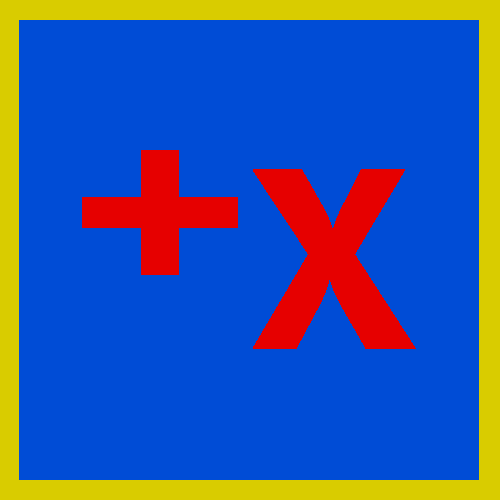
<style>
.page{position:relative;width:500px;height:500px;background:#004cd6}
.page>*{position:absolute;margin:0}
.t1{font:353px "Futura-CondensedMedium";color:#e60000;scale:1.25 1}
</style>
<div class="page">
<p class="t1" style="left:82px;top:150px;width:334px;height:199px">+x</p>
</div>
